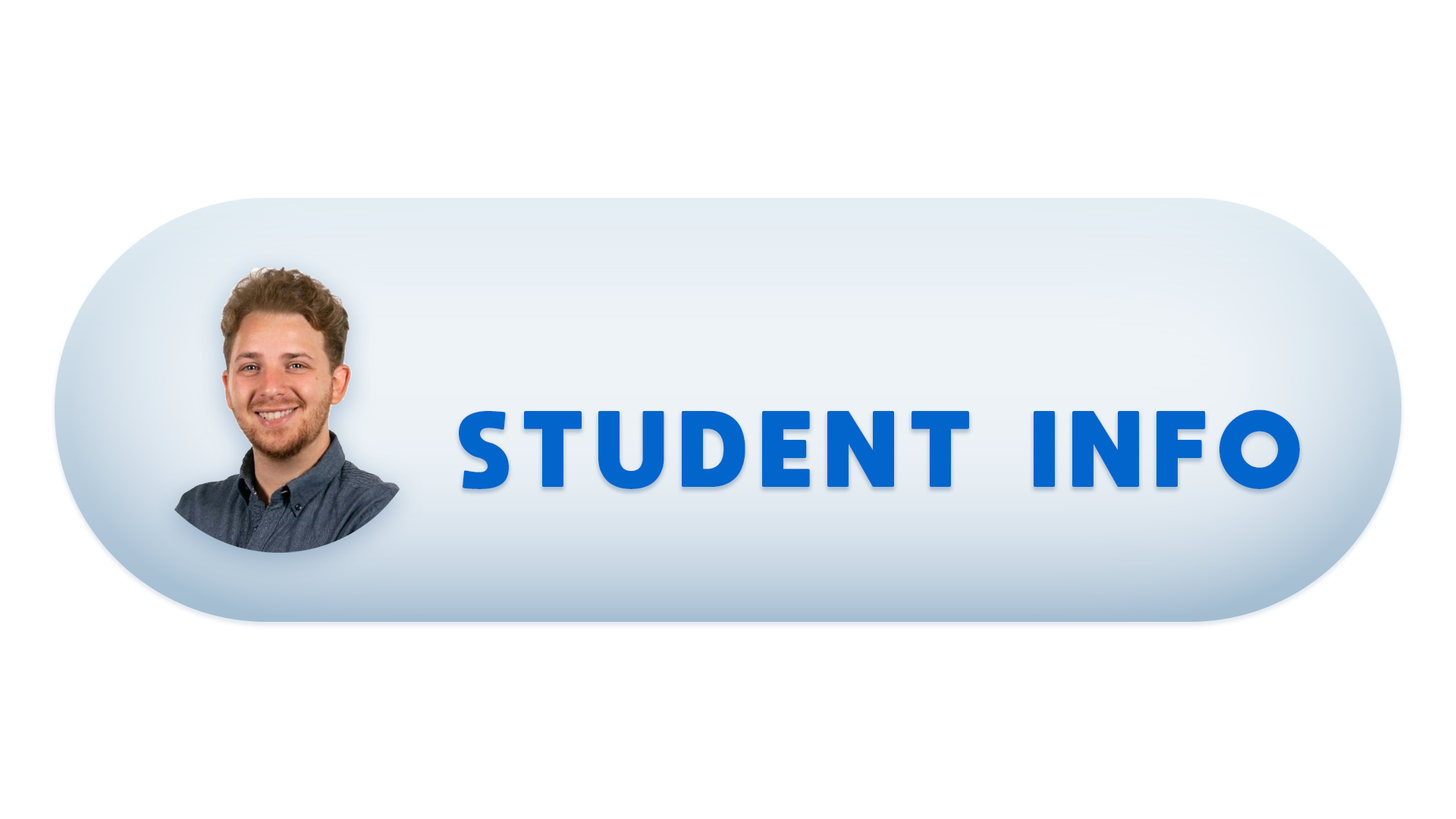
<style>
.page{position:relative;width:1456px;height:819px;background:#ffffff}
.page>*{position:absolute;margin:0}
.t1{font:75.8px "moon_get-Heavy";letter-spacing:0.2em;color:#0265cb}
</style>
<div class="page">
<p class="t1" style="left:459px;top:409px;width:841px;height:80px">STUDENT INFO</p>
</div>
